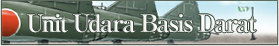
<style>
.page{position:relative;width:279px;height:46px}
.page>*{position:absolute;margin:0}
.t1{font:24px "RyuminPro-ExBold";letter-spacing:-0.08em;color:#ffffff}
</style>
<div class="page">
<p class="t1" style="left:26px;top:13px;width:231px;height:20px">Unit Udara Basis Darat</p>
</div>
